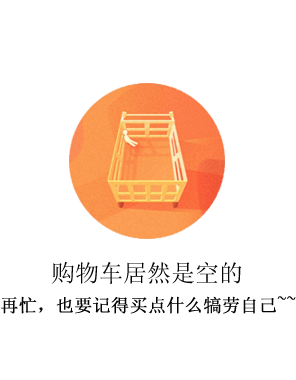
<style>
.page{position:relative;width:296px;height:380px;background:#ffffff}
.page>*{position:absolute;margin:0}
.t1{font:24px "SimSun";color:#050505}
.t2{font:18px "SimSun";color:#050505;font-weight:bold}
</style>
<div class="page">
<p class="t1" style="left:51px;top:261px;width:190px;height:23px">购物车居然是空的</p>
<p class="t2" style="left:1px;top:296px;width:295px;height:18px">再忙，也要记得买点什么犒劳自己~~</p>
</div>
